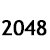
<style>
.page{position:relative;width:50px;height:50px;background:#ffffff}
.page>*{position:absolute;margin:0}
.t1{font:20.8px "TrebuchetMS";color:#000000;font-weight:bold}
</style>
<div class="page">
<p class="t1" style="left:2px;top:20px;width:45px;height:16px">2048</p>
</div>
